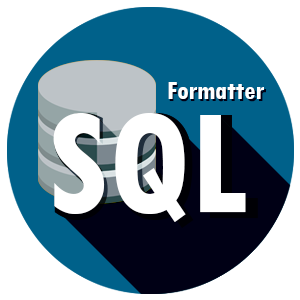
<style>
.page{position:relative;width:300px;height:300px;background:#ffffff}
.page>*{position:absolute;margin:0}
.t1{font:27px "TwCenMT-CondensedBold";color:#ffffff}
.t2{font:159px "TwCenMT-CondensedBold";color:#ffffff}
</style>
<div class="page">
<p class="t1" style="left:168px;top:82px;width:96px;height:17px">Formatter</p>
<p class="t2" style="left:53px;top:113px;width:193px;height:109px">SQL</p>
</div>
